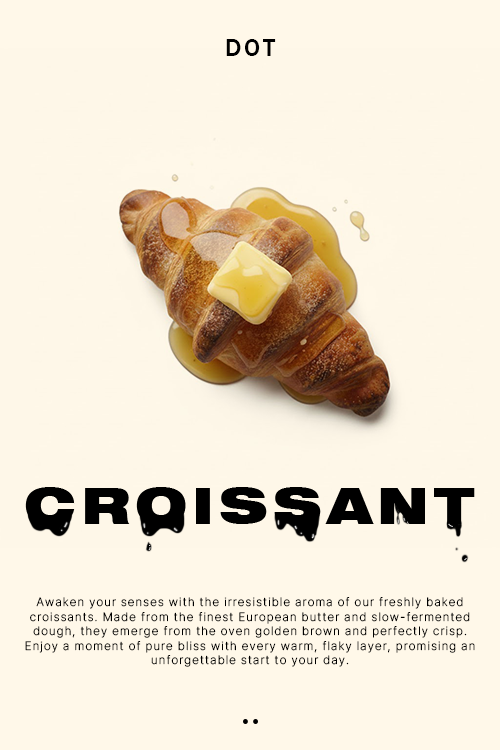
<style>
.page{position:relative;width:500px;height:750px;background:#fef7e8}
.page>*{position:absolute;margin:0}
.t1{font:25.2px "FranklinGothic-Medium";letter-spacing:0.1em;color:#000000;text-transform:uppercase}
.t2{font:12px/14.4px "Pretendard-ExtraLight";letter-spacing:0.1em;color:#000000}
</style>
<div class="page">
<p class="t1" style="left:226px;top:39px;width:50px;height:17px">DOT</p>
<p class="t2" style="left:25px;top:597px;width:450px;height:70px;text-align:center">Awaken your senses with the irresistible aroma of our freshly baked croissants. Made from the finest European butter and slow-fermented dough, they emerge from the oven golden brown and perfectly crisp. Enjoy a moment of pure bliss with every warm, flaky layer, promising an unforgettable start to your day.</p>
</div>
